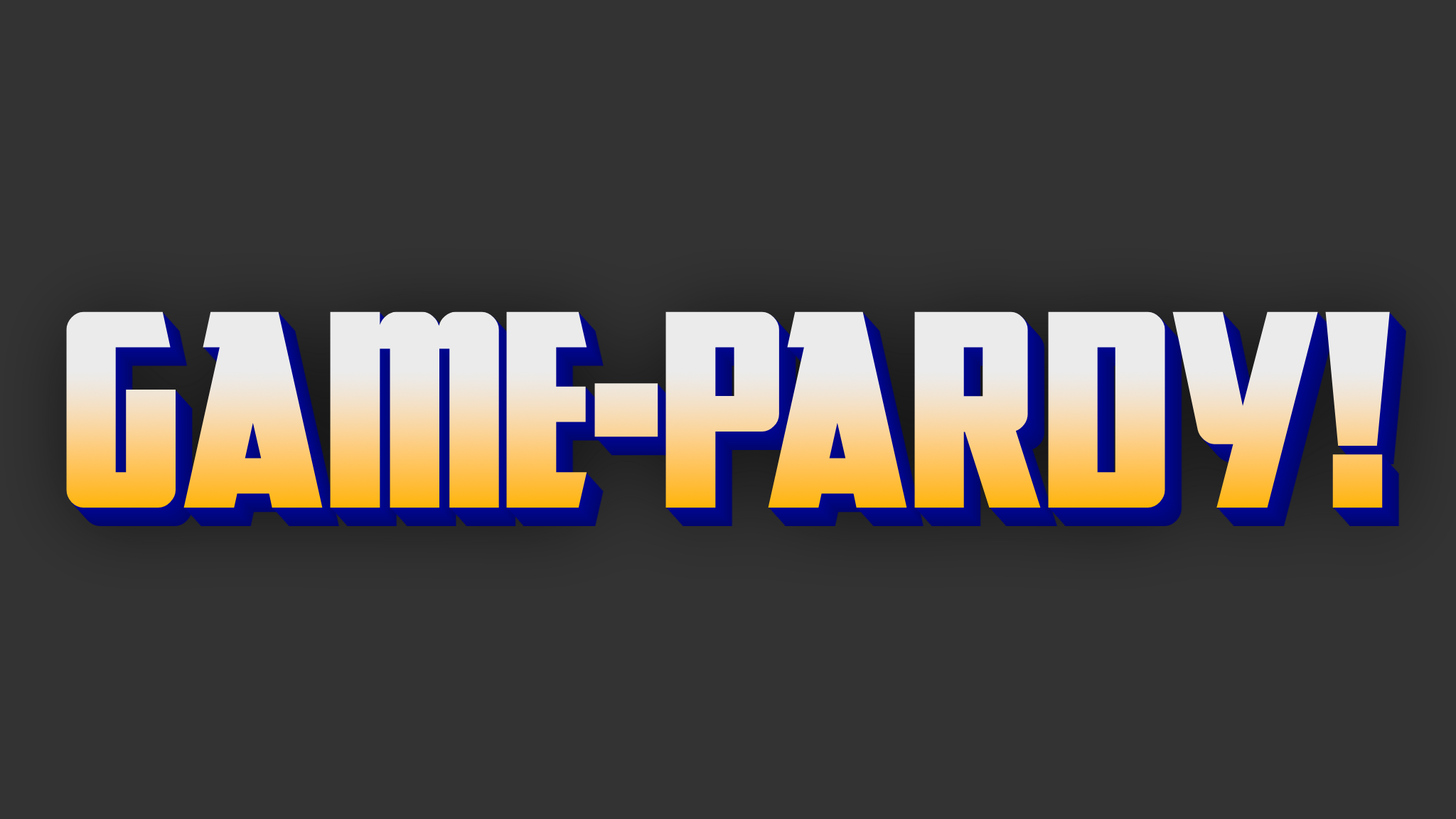
<style>
.page{position:relative;width:1456px;height:819px;background:#333333}
.page>*{position:absolute;margin:0}
.t1{font:231.1px "GreatLakesNF";scale:0.95 1}
</style>
<div class="page">
<p class="t1" style="left:66px;top:311px;width:1324px;height:197px">GAME-PARDY!</p>
</div>
